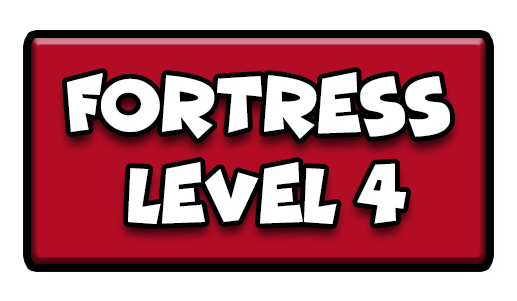
<style>
.page{position:relative;width:517px;height:301px;background:#ffffff}
.page>*{position:absolute;margin:0}
.t1{font:77.7px "Funhouse";color:#ffffff;scale:0.95 1}
</style>
<div class="page">
<p class="t1" style="left:67px;top:72px;width:383px;height:67px">FORTRESS</p>
<p class="t1" style="left:128px;top:162px;width:278px;height:62px">LEVEL 4</p>
</div>
